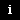
<style>
.page{position:relative;width:20px;height:20px;background:#000000}
.page>*{position:absolute;margin:0}
.t1{font:12px "LucidaFax-Demi";color:#ffffff}
</style>
<div class="page">
<p class="t1" style="left:8px;top:5px;width:4px;height:9px">i</p>
</div>
